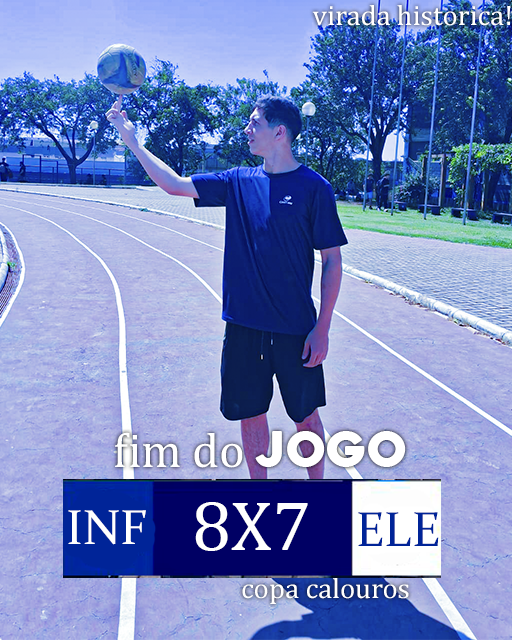
<style>
.page{position:relative;width:512px;height:640px}
.page>*{position:absolute;margin:0}
.t1{font:28.5px "Cambria";color:#ffffff}
.t2{font:48.6px "Cambria";color:#ffffff}
.t3{font:48.6px "Heavitas";color:#ffffff}
.t4{font:49.4px "Constantia";color:#ffffff}
.t5{font:70.1px "Cambria";color:#ffffff}
.t6{font:49.4px "Constantia";color:#002498}
</style>
<div class="page">
<p class="t1" style="left:312px;top:5px;width:199px;height:21px">virada historica!</p>
<p class="t2" style="left:115px;top:431px;width:291px;height:37px">fim do <span class="t3">JOGO</span></p>
<p class="t4" style="left:68px;top:510px;width:78px;height:35px">INF</p>
<p class="t5" style="left:195px;top:502px;width:113px;height:49px">8X7</p>
<p class="t6" style="left:358px;top:512px;width:81px;height:34px">ELE</p>
<p class="t1" style="left:242px;top:578px;width:167px;height:26px">copa calouros</p>
</div>
